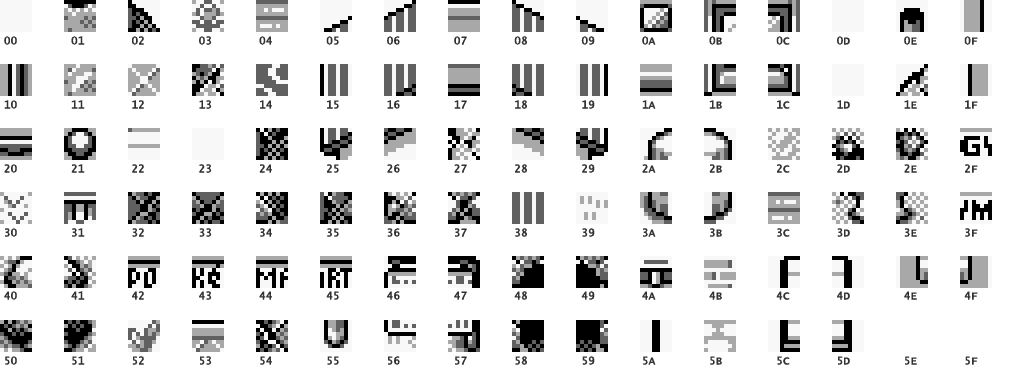
<style>
.page{position:relative;width:1024px;height:384px;background:#ffffff}
.page>*{position:absolute;margin:0}
.t1{font:10.7px "LucidaConsole";color:#333132;font-weight:bold}
</style>
<div class="page">
<p class="t1" style="left:4px;top:36px;width:974px;height:9px">00        01       02        03       04        05       06        07       08        09       0A        0B        0C       0D        0E       0F</p>
<p class="t1" style="left:4px;top:100px;width:974px;height:9px">10        11       12        13       14        15       16        17       18        19       1A        1B        1C       1D        1E       1F</p>
<p class="t1" style="left:4px;top:164px;width:974px;height:9px">20        21       22        23       24        25       26        27       28        29       2A        2B        2C       2D        2E       2F</p>
<p class="t1" style="left:5px;top:228px;width:973px;height:9px">30        31       32        33       34        35       36        37       38        39       3A        3B        3C       3D        3E       3F</p>
<p class="t1" style="left:4px;top:291px;width:974px;height:9px">40        41       42        43       44        45       46        47       48        49       4A        4B        4C       4D        4E       4F</p>
<p class="t1" style="left:5px;top:356px;width:973px;height:9px">50        51       52        53       54        55       56        57       58        59       5A        5B        5C       5D        5E       5F</p>
</div>
